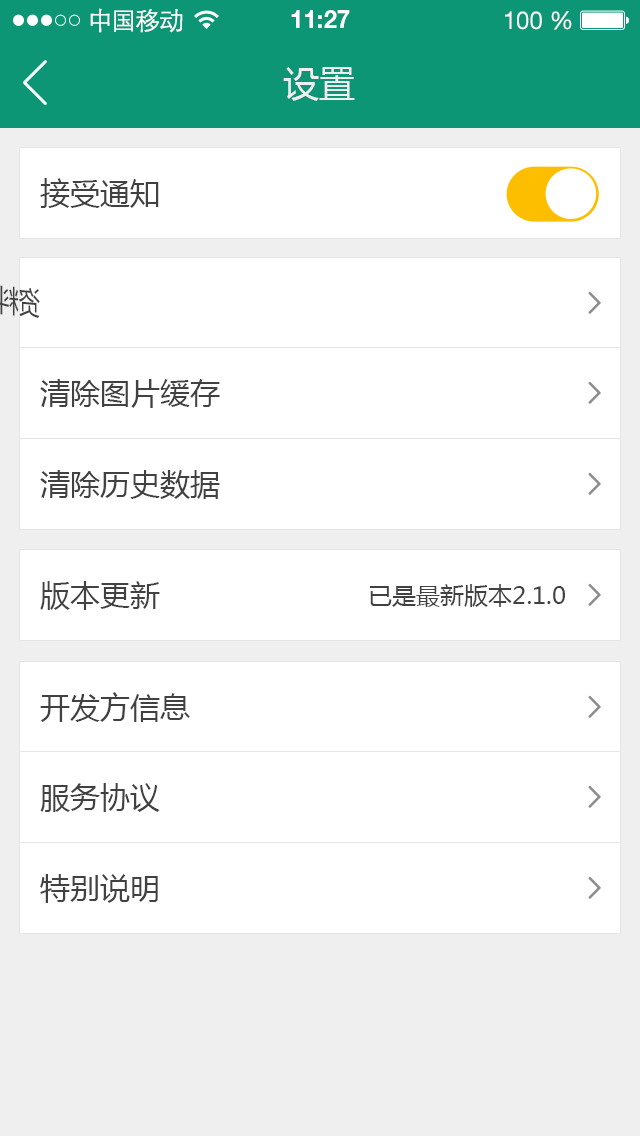
<style>
.page{position:relative;width:640px;height:1136px;background:#ffffff}
.page>*{position:absolute;margin:0}
.t1{font:25px "STXihei";letter-spacing:-0.045em;color:#fefefe}
.t2{font:24.6px "HelveticaNeueLTPro-Bd";color:#ffffff}
.t3{font:24.6px "HelveticaNeueLTStd-Roman";color:#ffffff}
.t4{font:36px "MicrosoftYaHei";color:#efefef}
.t5{font:30px "MicrosoftYaHei";color:#414141}
.t6{font:24px "MicrosoftYaHei";color:#414141}
</style>
<div class="page">
<p class="t1" style="left:90px;top:8px;width:93px;height:25px">中国移动</p>
<p class="t2" style="left:291px;top:10px;width:59px;height:18px">11:27</p>
<p class="t3" style="left:505px;top:11px;width:67px;height:19px">100 %</p>
<p class="t4" style="left:283px;top:67px;width:72px;height:34px">设置</p>
<p class="t5" style="left:40px;top:178px;width:119px;height:30px">接受通知</p>
<p class="t5" style="left:40px;top:379px;width:180px;height:29px">清除图片缓存</p>
<p class="t5" style="left:40px;top:470px;width:180px;height:29px">清除历史数据</p>
<p class="t5" style="left:40px;top:581px;width:120px;height:29px">版本更新</p>
<p class="t6" style="left:369px;top:584px;width:196px;height:23px">已是最新版本2.1.0</p>
<p class="t5" style="left:40px;top:692px;width:150px;height:30px">开发方信息</p>
<p class="t5" style="left:40px;top:783px;width:120px;height:29px">服务协议</p>
<p class="t5" style="left:40px;top:874px;width:118px;height:29px">特别说明</p>
</div>
